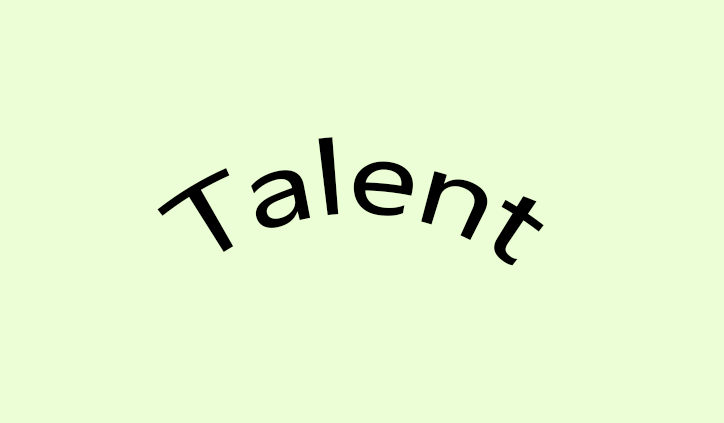
<style>
.page{position:relative;width:724px;height:423px;background:#ebfed5}
.page>*{position:absolute;margin:0}
.t1{font:96px "MicrosoftYaHei";color:#010000}
</style>
<div class="page">
<p class="t1" style="left:157px;top:137px;width:387px;height:129px">Talent</p>
</div>
